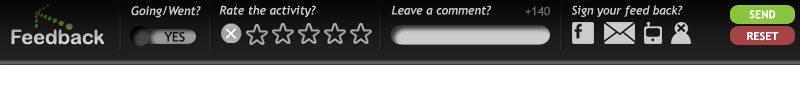
<style>
.page{position:relative;width:800px;height:100px;background:#ffffff}
.page>*{position:absolute;margin:0}
.t1{font:37.3px "DingsbumsBats";scale:1.06 1}
.t2{font:12px "TrebuchetMS-Italic";color:#cccccc}
.t3{font:12px "TrebuchetMS";color:#666666}
.t4{font:11px "TrebuchetMS-Bold";color:#ffffff}
.t5{font:20px "ArialRoundedMTBold";color:#c7c7c7}
.t6{font:13px "TrebuchetMS";color:#111111}
</style>
<div class="page">
<p class="t1" style="left:35px;top:3px;width:38px;height:27px;rotate:180deg">l</p>
<p class="t2" style="left:131px;top:6px;width:70px;height:12px">Going/Went?</p>
<p class="t2" style="left:219px;top:5px;width:97px;height:12px">Rate the activity?</p>
<p class="t2" style="left:391px;top:5px;width:101px;height:10px">Leave a comment?</p>
<p class="t3" style="left:525px;top:6px;width:25px;height:10px">+140</p>
<p class="t2" style="left:572px;top:5px;width:111px;height:12px">Sign your feed back?</p>
<p class="t4" style="left:749px;top:10px;width:27px;height:9px">SEND</p>
<p class="t5" style="left:11px;top:29px;width:93px;height:16px">Feedback</p>
<p class="t6" style="left:164px;top:32px;width:21px;height:10px">YES</p>
<p class="t4" style="left:747px;top:32px;width:32px;height:9px">RESET</p>
</div>
